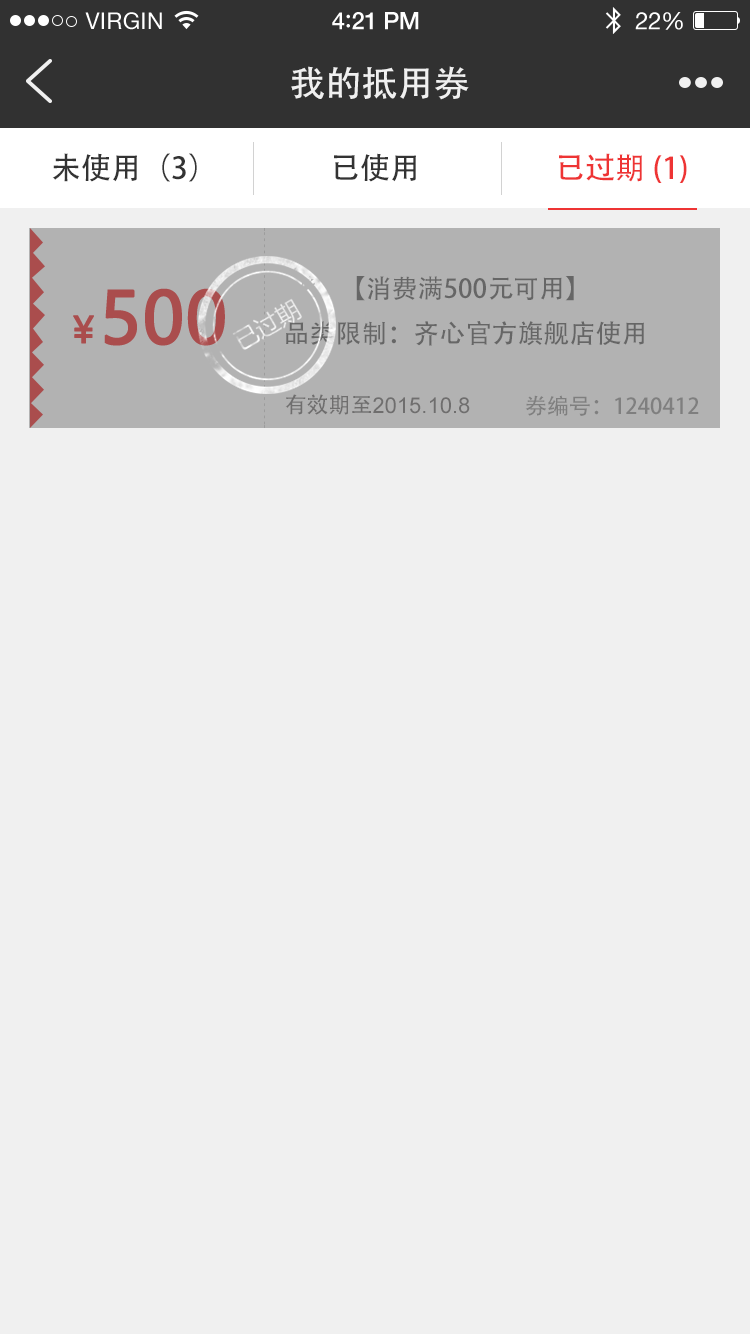
<style>
.page{position:relative;width:750px;height:1334px;background:#f0f0f0}
.page>*{position:absolute;margin:0}
.t1{font:36px "AdobeHeitiStd-Regular";color:#f0f0f0}
.t2{font:30px "AdobeHeitiStd-Regular";color:#333333}
.t3{font:30px "AdobeHeitiStd-Regular";color:#ee3434}
.t4{font:26px "AdobeHeitiStd-Regular";color:#666666}
.t5{font:70px "MicrosoftYaHei";color:#aa4d4d;font-weight:bold}
.t6{font:36px "MicrosoftYaHei";color:#aa4d4d;font-weight:bold}
.t7{font:22px "ArialMT";color:#797777}
.t8{font:22px "AdobeHeitiStd-Regular";color:#797777}
.t9{font:22px "AdobeHeitiStd-Regular";color:#7f7f7f}
</style>
<div class="page">
<p class="t1" style="left:291px;top:66px;width:178px;height:34px">我的抵用券</p>
<p class="t2" style="left:52px;top:153px;width:145px;height:29px">未使用（3）</p>
<p class="t2" style="left:334px;top:153px;width:82px;height:29px">已使用</p>
<p class="t3" style="left:559px;top:153px;width:128px;height:30px">已过期(1)</p>
<p class="t4" style="left:286px;top:276px;width:358px;height:70px;text-align:center">【消费满500元可用】<br>品类限制：齐心官方旗舰店使用</p>
<p class="t5" style="left:104px;top:288px;width:121px;height:58px">500</p>
<p class="t6" style="left:73px;top:315px;width:21px;height:29px">￥</p>
<p class="t7" style="left:285px;top:394px;width:185px;height:21px"><span class="t8">有效期至</span>2015.10.8</p>
<p class="t9" style="left:525px;top:395px;width:174px;height:21px">券编号：1240412</p>
</div>
